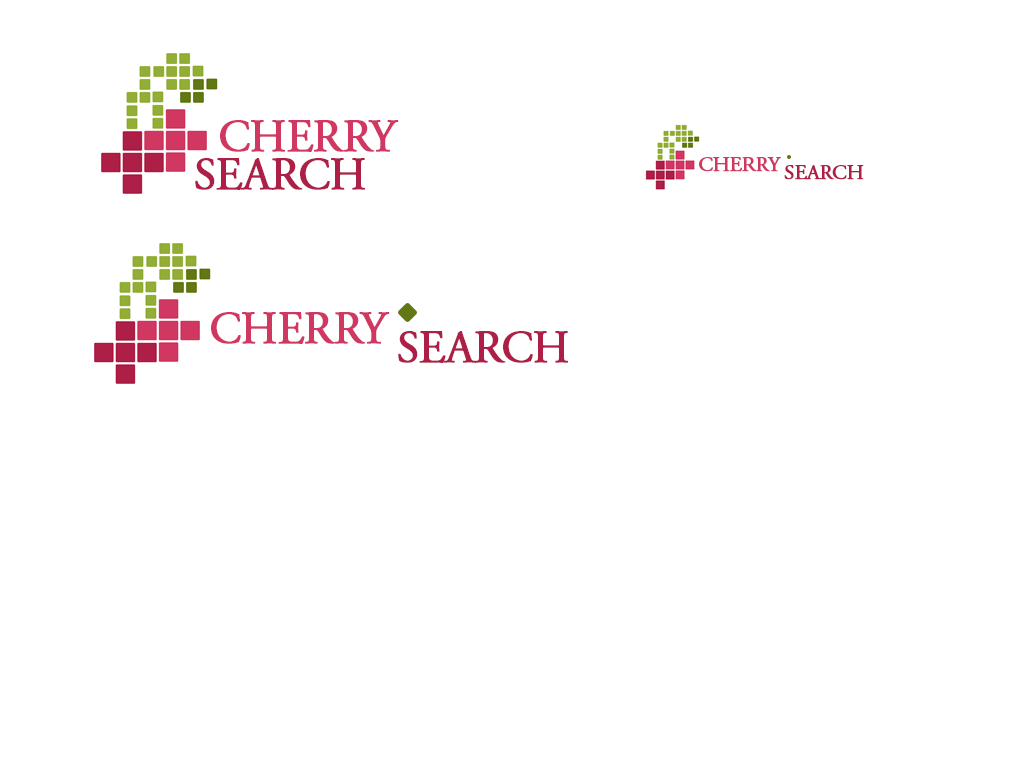
<style>
.page{position:relative;width:1024px;height:768px;background:#ffffff}
.page>*{position:absolute;margin:0}
.t1{font:45.3px "AGaramondPro-Regular";letter-spacing:-0.025em;color:#d03862;font-weight:bold}
.t2{font:45.3px "AGaramondPro-Regular";letter-spacing:-0.025em;color:#ad1f46;font-weight:bold}
.t3{font:20.7px "AGaramondPro-Regular";letter-spacing:-0.025em;color:#d03862;font-weight:bold}
.t4{font:20.7px "AGaramondPro-Regular";letter-spacing:-0.025em;color:#ad1f46;font-weight:bold}
</style>
<div class="page">
<p class="t1" style="left:220px;top:120px;width:179px;height:32px">CHERRY</p>
<p class="t2" style="left:195px;top:158px;width:170px;height:32px">SEARCH</p>
<p class="t3" style="left:699px;top:157px;width:82px;height:15px">CHERRY</p>
<p class="t4" style="left:784px;top:165px;width:80px;height:15px">SEARCH</p>
<p class="t1" style="left:211px;top:312px;width:179px;height:32px">CHERRY</p>
<p class="t2" style="left:398px;top:331px;width:170px;height:32px">SEARCH</p>
</div>
